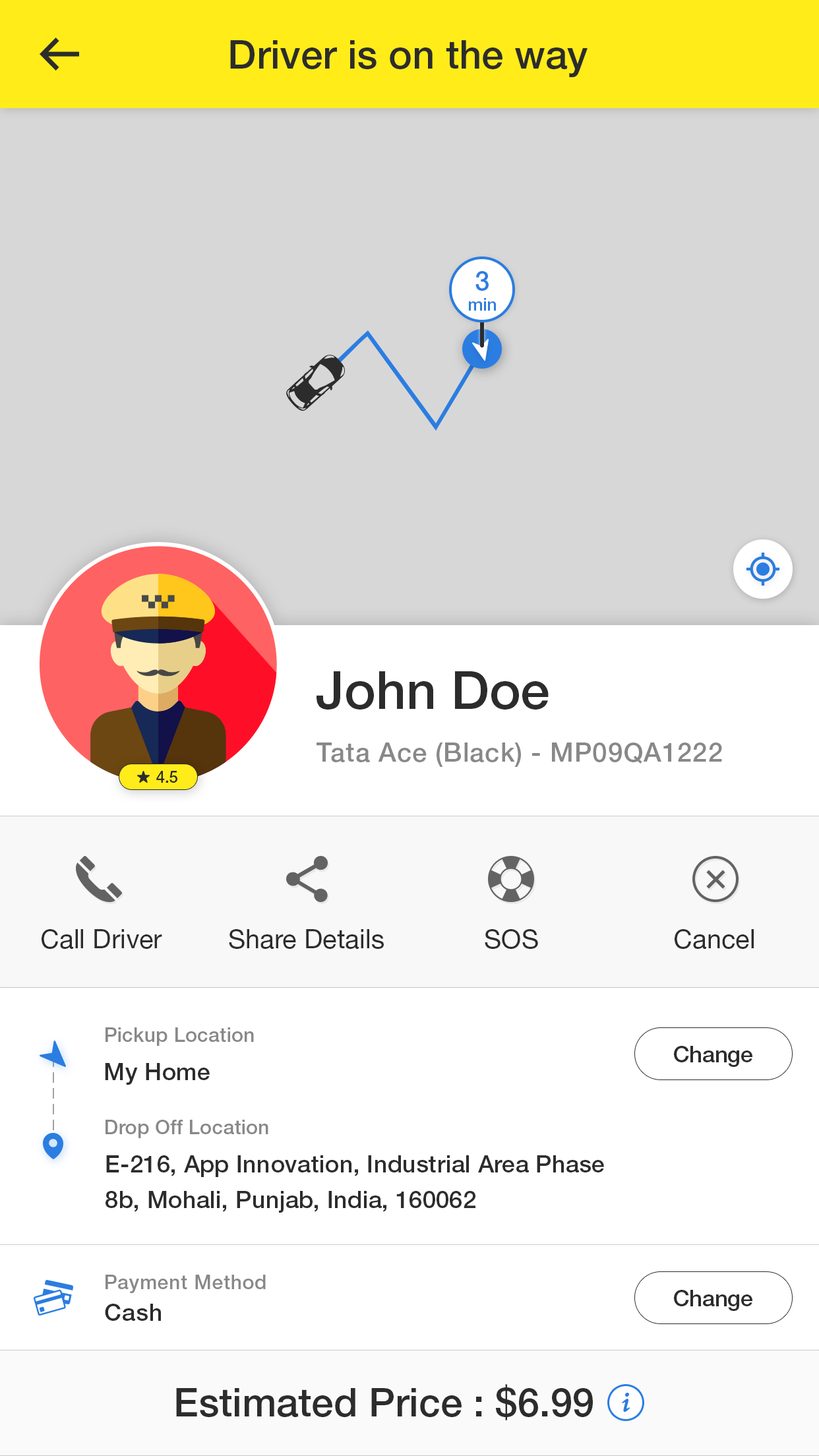
<style>
.page{position:relative;width:819px;height:1456px;background:#ffffff}
.page>*{position:absolute;margin:0}
.t1{font:39.6px "HelveticaNeueLTStd-Md";color:#2c2c2c}
.t2{font:17.1px "HelveticaNeueLTStd-Md";color:#2b7de1}
.t3{font:26.4px "HelveticaNeueLTStd-Md";color:#2b7de1}
.t4{font:52.8px "HelveticaNeueLTStd-Md";color:#2c2c2c}
.t5{font:26.4px "HelveticaNeueLTStd-Md";letter-spacing:0.025em;color:#888888}
.t6{font:15.8px "HelveticaNeueLTStd-Md";color:#2c2c2c}
.t7{font:26.4px "HelveticaNeueLTStd-Roman";color:#2c2c2c}
.t8{font:19.8px "HelveticaNeueLTStd-Md";letter-spacing:0.01em;color:#888888}
.t9{font:22.4px "HelveticaNeueLTStd-Md";color:#2c2c2c}
.t10{font:23.7px "HelveticaNeueLTStd-Md";letter-spacing:0.01em;color:#2c2c2c}
.t11{font:23.7px/35.6px "HelveticaNeueLTStd-Md";letter-spacing:0.01em;color:#2c2c2c}
.t12{font:19.8px "HelveticaNeueLTStd-Md";letter-spacing:0.025em;color:#888888}
.t13{font:23.7px "HelveticaNeueLTStd-Md";letter-spacing:0.025em;color:#2c2c2c}
</style>
<div class="page">
<p class="t1" style="left:230px;top:40px;width:358px;height:37px">Driver is on the way</p>
<p class="t2" style="left:469px;top:271px;width:27px;height:40px;text-align:center"><span class="t3">3<br></span>min</p>
<p class="t4" style="left:317px;top:671px;width:232px;height:39px">John Doe</p>
<p class="t5" style="left:317px;top:742px;width:405px;height:25px">Tata Ace (Black) - MP09QA1222</p>
<p class="t6" style="left:156px;top:771px;width:21px;height:12px">4.5</p>
<p class="t7" style="left:42px;top:929px;width:120px;height:20px">Call Driver</p>
<p class="t7" style="left:229px;top:929px;width:155px;height:20px">Share Details</p>
<p class="t7" style="left:485px;top:929px;width:53px;height:20px">SOS</p>
<p class="t7" style="left:675px;top:929px;width:79px;height:20px">Cancel</p>
<p class="t8" style="left:106px;top:1027px;width:148px;height:19px">Pickup Location</p>
<p class="t9" style="left:674px;top:1046px;width:78px;height:21px">Change</p>
<p class="t10" style="left:105px;top:1063px;width:105px;height:22px">My Home</p>
<p class="t8" style="left:106px;top:1120px;width:162px;height:18px">Drop Off Location</p>
<p class="t11" style="left:106px;top:1155px;width:498px;height:58px">E-216, App Innovation, Industrial Area Phase<br>8b, Mohali, Punjab, India, 160062</p>
<p class="t12" style="left:106px;top:1275px;width:160px;height:18px">Payment Method</p>
<p class="t9" style="left:674px;top:1290px;width:78px;height:21px">Change</p>
<p class="t13" style="left:105px;top:1304px;width:56px;height:17px">Cash</p>
<p class="t1" style="left:176px;top:1384px;width:417px;height:36px">Estimated Price : $6.99</p>
</div>
